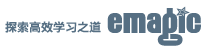
<style>
.page{position:relative;width:207px;height:50px;background:#ffffff}
.page>*{position:absolute;margin:0}
.t1{font:27.9px "262-CAI978";letter-spacing:0.025em;color:#566f83;scale:1.23 1}
.t2{font:12px "FZYDZHJW--GB1-0";color:#566f83}
</style>
<div class="page">
<p class="t1" style="left:107px;top:6px;width:94px;height:40px">emagic</p>
<p class="t2" style="left:5px;top:21px;width:96px;height:12px">探索高效学习之道</p>
</div>
